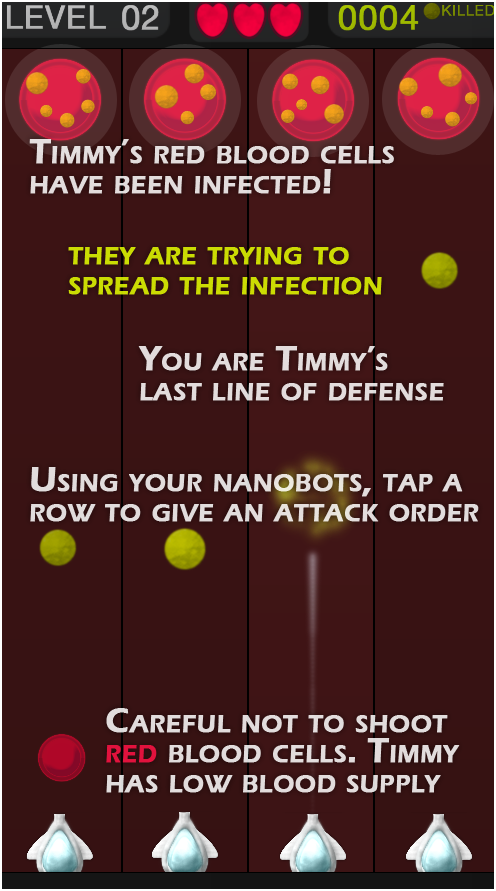
<style>
.page{position:relative;width:496px;height:891px}
.page>*{position:absolute;margin:0}
.t1{font:36px/30px "ErasITC-Demi";color:#e2dcdc;font-variant:small-caps;font-weight:bold}
.t2{font:36px/30px "ErasITC-Demi";color:#cbdc03;font-variant:small-caps;font-weight:bold}
.t3{font:36px/30px "ErasITC-Demi";color:#e1dcdc;font-variant:small-caps;font-weight:bold}
</style>
<div class="page">
<p class="t1" style="left:29px;top:139px;width:365px;height:55px">Timmy’s red blood cells<br>have been infected!</p>
<p class="t2" style="left:68px;top:247px;width:314px;height:48px">they are trying to <br>spread the infection</p>
<p class="t1" style="left:138px;top:346px;width:306px;height:55px">You are Timmy’s <br>last line of defense</p>
<p class="t3" style="left:30px;top:467px;width:449px;height:55px">Using your nanobots, tap a<br>row to give an attack order</p>
<p class="t3" style="left:106px;top:708px;width:354px;height:85px">Careful not to shoot <br>red blood cells. Timmy <br>has low blood supply</p>
</div>
